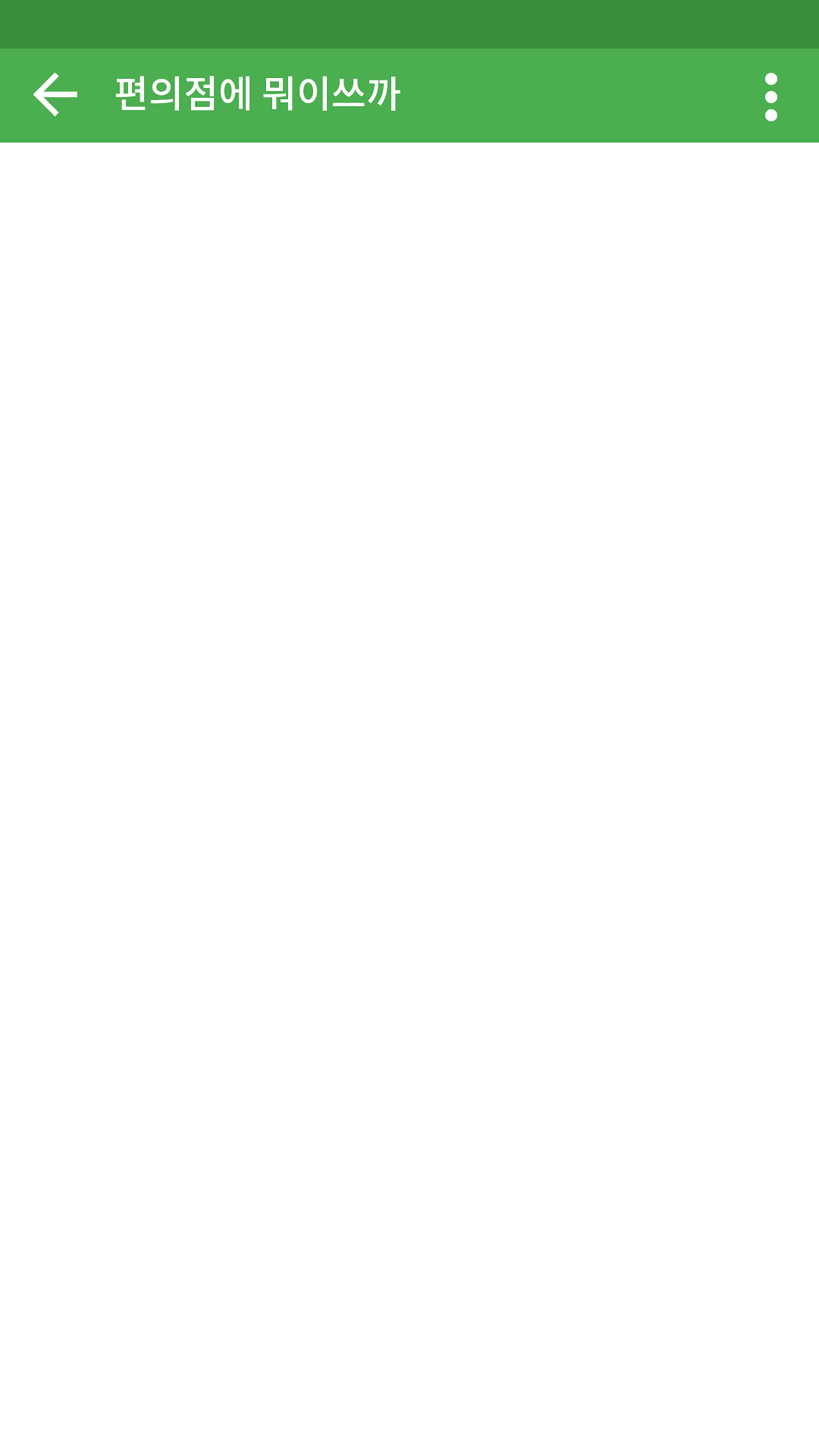
<style>
.page{position:relative;width:819px;height:1456px;background:#ffffff}
.page>*{position:absolute;margin:0}
.t1{font:37.9px "NotoSansCJKkr-Medium";color:#ffffff}
</style>
<div class="page">
<p class="t1" style="left:115px;top:76px;width:285px;height:35px">편의점에 뭐이쓰까</p>
</div>
